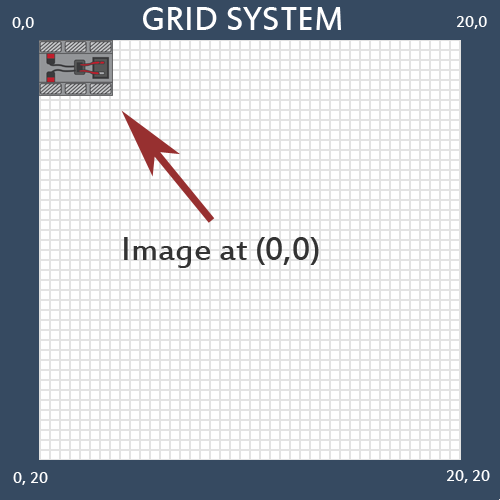
<style>
.page{position:relative;width:500px;height:500px;background:#ffffff}
.page>*{position:absolute;margin:0}
.t1{font:18px "EstrangeloEdessa";color:#ffffff}
.t2{font:36px "EstrangeloEdessa";color:#ffffff}
.t3{font:36px "EstrangeloEdessa";color:#333333}
</style>
<div class="page">
<p class="t1" style="left:12px;top:17px;width:22px;height:13px">0,0</p>
<p class="t2" style="left:143px;top:7px;width:198px;height:23px">GRID SYSTEM</p>
<p class="t1" style="left:457px;top:16px;width:30px;height:13px">20,0</p>
<p class="t3" style="left:124px;top:237px;width:195px;height:31px">Image at (0,0)</p>
<p class="t1" style="left:13px;top:472px;width:35px;height:13px">0, 20</p>
<p class="t1" style="left:447px;top:470px;width:43px;height:13px">20, 20</p>
</div>
